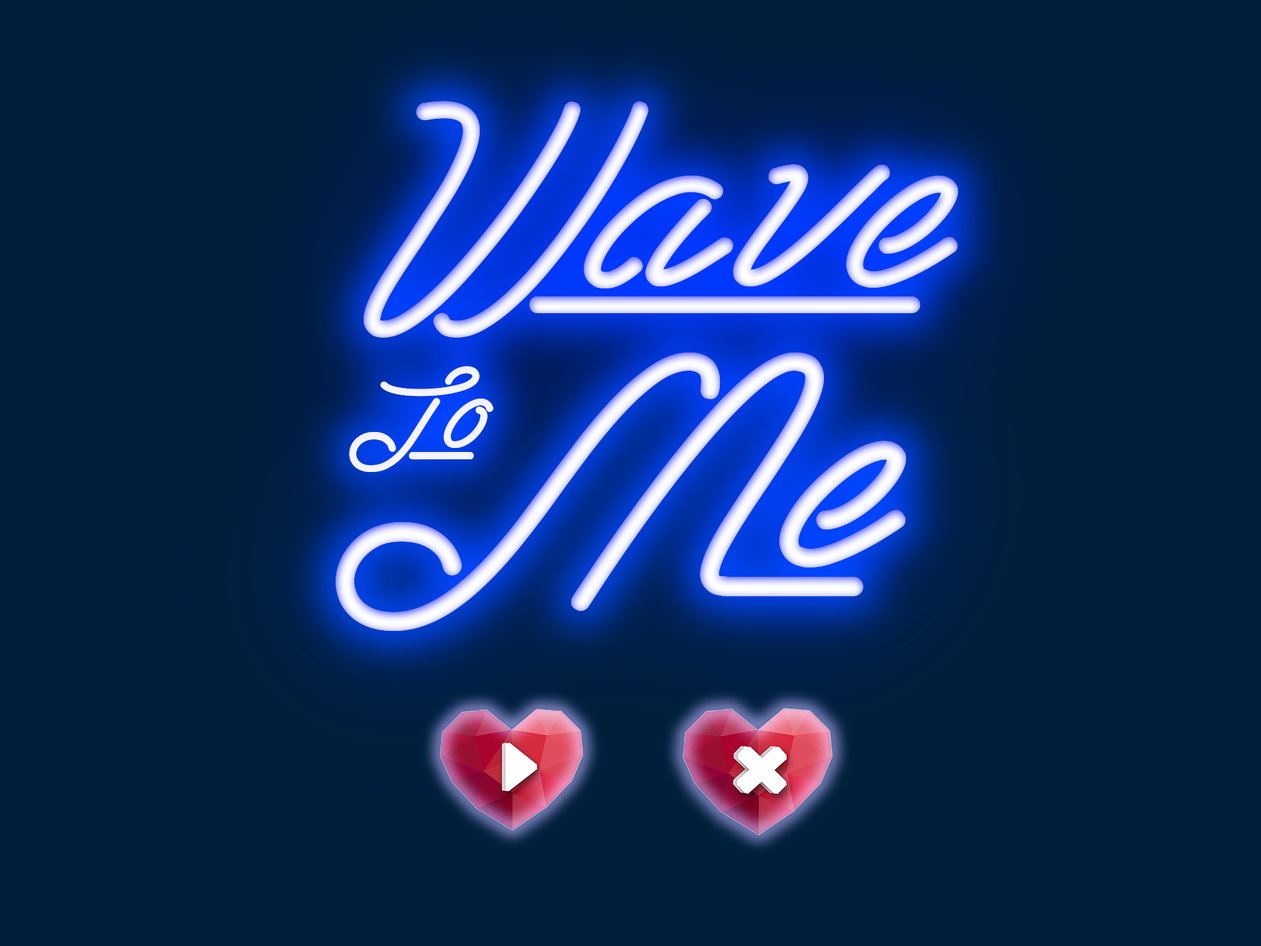
<style>
.page{position:relative;width:1261px;height:946px;background:#001f3b}
.page>*{position:absolute;margin:0}
.t1{font:319.2px "LasEnterPersonalUseOnly"}
.t2{font:361.4px "LasEnterPersonalUseOnly"}
.t3{font:133.5px "LasEnterPersonalUseOnly";color:#ffffff}
</style>
<div class="page">
<p class="t1" style="left:364px;top:101px;width:594px;height:237px">Wave</p>
<p class="t2" style="left:336px;top:352px;width:570px;height:279px">Me</p>
<p class="t3" style="left:349px;top:366px;width:145px;height:106px">To</p>
</div>
